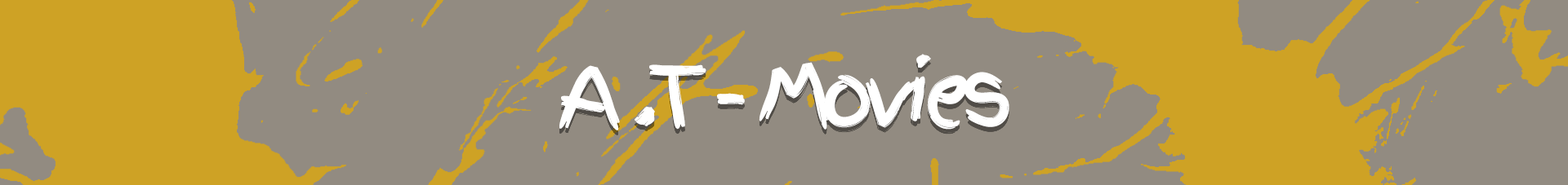
<style>
.page{position:relative;width:1568px;height:185px;background:#928b81}
.page>*{position:absolute;margin:0}
.t1{font:81.7px "FingerPaint-Regular";letter-spacing:-0.116em;color:#ffffff}
</style>
<div class="page">
<p class="t1" style="left:559px;top:54px;width:450px;height:77px">A .T - Movies</p>
</div>
